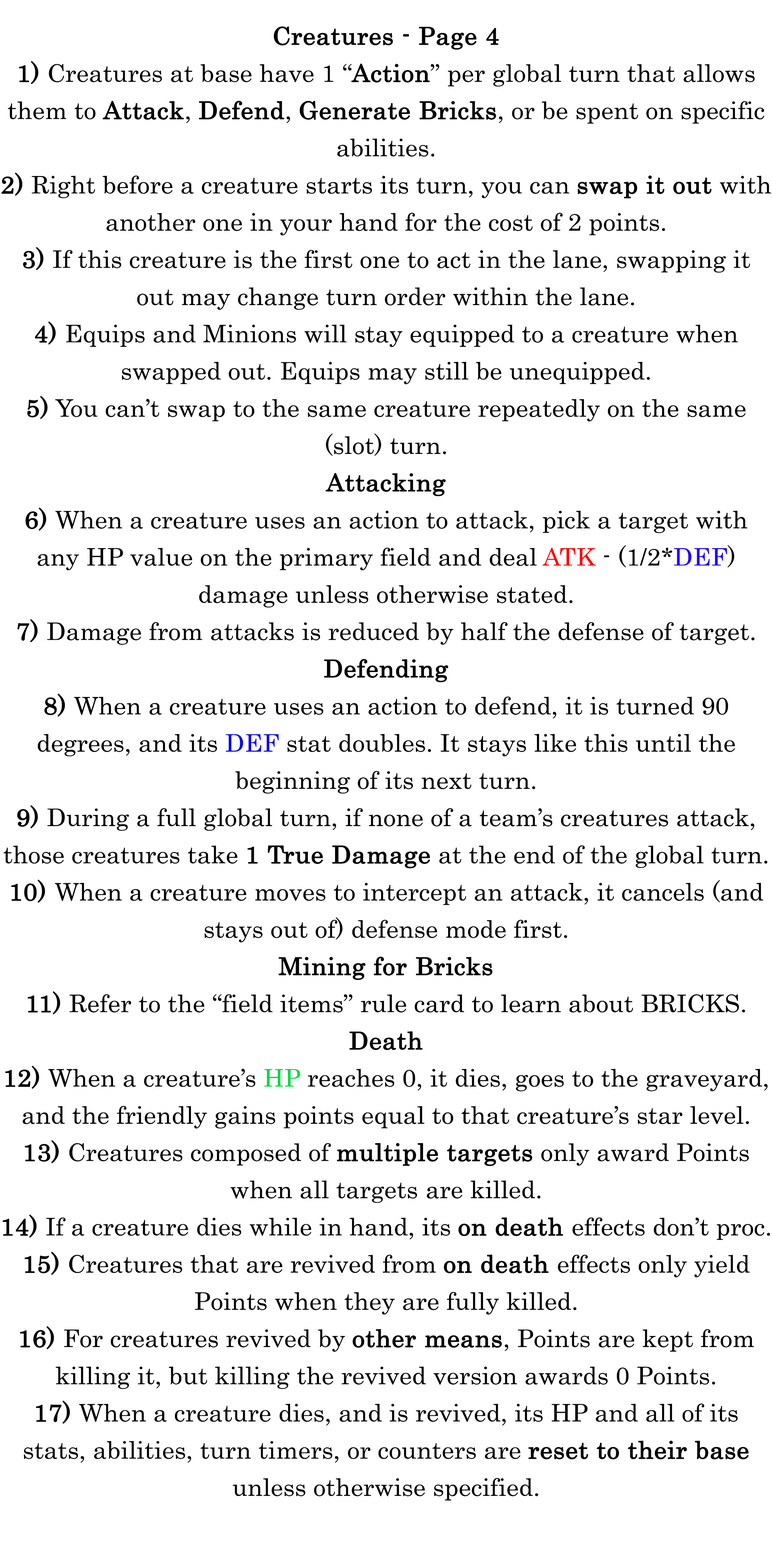
<style>
.page{position:relative;width:772px;height:1544px;background:#ffffff}
.page>*{position:absolute;margin:0}
.t1{font:41.4px/37.2px "Century";color:#000000;scale:1.04 1}
.t2{font:41.4px/37.2px "Century";color:#000000;font-weight:bold;scale:1.04 1}
.t3{font:41.4px/37.2px "Century";color:#ff0000;scale:1.04 1}
.t4{font:41.4px/37.2px "Century";color:#1e00ff;scale:1.04 1}
.t5{font:41.4px/37.2px "Century";color:#0600f7;scale:1.04 1}
.t6{font:41.4px/37.2px "Century";color:#00d942;scale:1.04 1}
</style>
<div class="page">
<p class="t1" style="left:1px;top:26px;width:770px;height:1475px;text-align:center"><span class="t2">Creatures - Page 4<br>1)</span> Creatures at base have 1 “<span class="t2">Action</span>” per global turn that allows them to <span class="t2">Attack</span>, <span class="t2">Defend</span>, <span class="t2">Generate Bricks</span>, or be spent on specific abilities.<br><span class="t2">2)</span> Right before a creature starts its turn, you can <span class="t2">swap it out</span> with another one in your hand for the cost of 2 points.<br><span class="t2">3)</span> If this creature is the first one to act in the lane, swapping it out may change turn order within the lane.<br><span class="t2">4)</span> Equips and Minions will stay equipped to a creature when swapped out. Equips may still be unequipped.<br><span class="t2">5)</span> You can’t swap to the same creature repeatedly on the same (slot) turn.<br><span class="t2">Attacking<br>6)</span> When a creature uses an action to attack, pick a target with any HP value on the primary field and deal <span class="t3">ATK </span>- (1/2*<span class="t4">DEF</span>) damage unless otherwise stated.<br><span class="t2">7)</span> Damage from attacks is reduced by half the defense of target.<br><span class="t2">Defending<br>8)</span> When a creature uses an action to defend, it is turned 90 degrees, and its <span class="t5">DEF</span> stat doubles. It stays like this until the beginning of its next turn.<br><span class="t2">9)</span> During a full global turn, if none of a team’s creatures attack, those creatures take <span class="t2">1 True Damage</span> at the end of the global turn.<br><span class="t2">10) </span>When a creature moves to intercept an attack, it cancels (and stays out of) defense mode first.<br><span class="t2">Mining for Bricks<br>11)</span> Refer to the “field items” rule card to learn about BRICKS.<br><span class="t2">Death<br>12)</span> When a creature’s <span class="t6">HP</span> reaches 0, it dies, goes to the graveyard, and the friendly gains points equal to that creature’s star level.<br><span class="t2">13)</span> Creatures composed of <span class="t2">multiple targets</span> only award Points when all targets are killed.<br><span class="t2">14)</span> If a creature dies while in hand, its <span class="t2">on death </span>effects don’t proc.<br><span class="t2">15)</span> Creatures that are revived from <span class="t2">on death </span>effects only yield Points when they are fully killed.<br><span class="t2">16)</span> For creatures revived by <span class="t2">other means</span>, Points are kept from killing it, but killing the revived version awards 0 Points.<br><span class="t2">17)</span> When a creature dies, and is revived, its HP and all of its stats, abilities, turn timers, or counters are <span class="t2">reset to their base</span> unless otherwise specified.</p>
</div>
